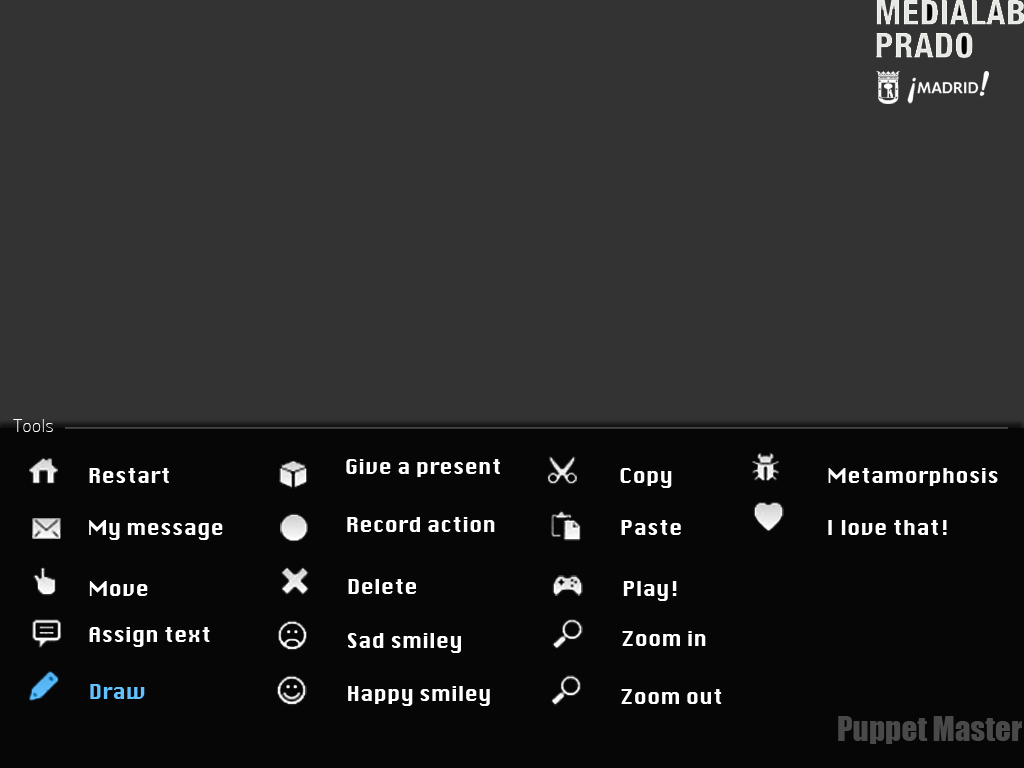
<style>
.page{position:relative;width:1024px;height:768px;background:#333333}
.page>*{position:absolute;margin:0}
.t1{font:18px "Panefresco1wt-Regular";color:#ffffff}
.t2{font:20.2px "Silom";color:#ffffff}
.t3{font:20.2px "Silom";color:#61c2ff}
.t4{font:31.3px "Impact";color:#494949}
</style>
<div class="page">
<p class="t1" style="left:13px;top:419px;width:40px;height:13px">Tools</p>
<p class="t2" style="left:346px;top:459px;width:154px;height:18px">Give a present</p>
<p class="t2" style="left:89px;top:468px;width:80px;height:15px">Restart</p>
<p class="t2" style="left:620px;top:468px;width:52px;height:20px">Copy</p>
<p class="t2" style="left:828px;top:468px;width:170px;height:18px">Metamorphosis</p>
<p class="t2" style="left:89px;top:520px;width:134px;height:20px">My message</p>
<p class="t2" style="left:347px;top:517px;width:148px;height:15px">Record action</p>
<p class="t2" style="left:621px;top:520px;width:60px;height:15px">Paste</p>
<p class="t2" style="left:828px;top:520px;width:119px;height:15px">I love that!</p>
<p class="t2" style="left:89px;top:581px;width:59px;height:15px">Move</p>
<p class="t2" style="left:348px;top:579px;width:68px;height:15px">Delete</p>
<p class="t2" style="left:623px;top:581px;width:54px;height:20px">Play!</p>
<p class="t2" style="left:89px;top:627px;width:121px;height:20px">Assign text</p>
<p class="t2" style="left:347px;top:633px;width:114px;height:20px">Sad smiley</p>
<p class="t2" style="left:622px;top:631px;width:84px;height:15px">Zoom in</p>
<p class="t3" style="left:90px;top:684px;width:55px;height:15px">Draw</p>
<p class="t2" style="left:348px;top:686px;width:142px;height:20px">Happy smiley</p>
<p class="t2" style="left:621px;top:689px;width:101px;height:15px">Zoom out</p>
<p class="t4" style="left:838px;top:716px;width:184px;height:28px">Puppet Master</p>
</div>
